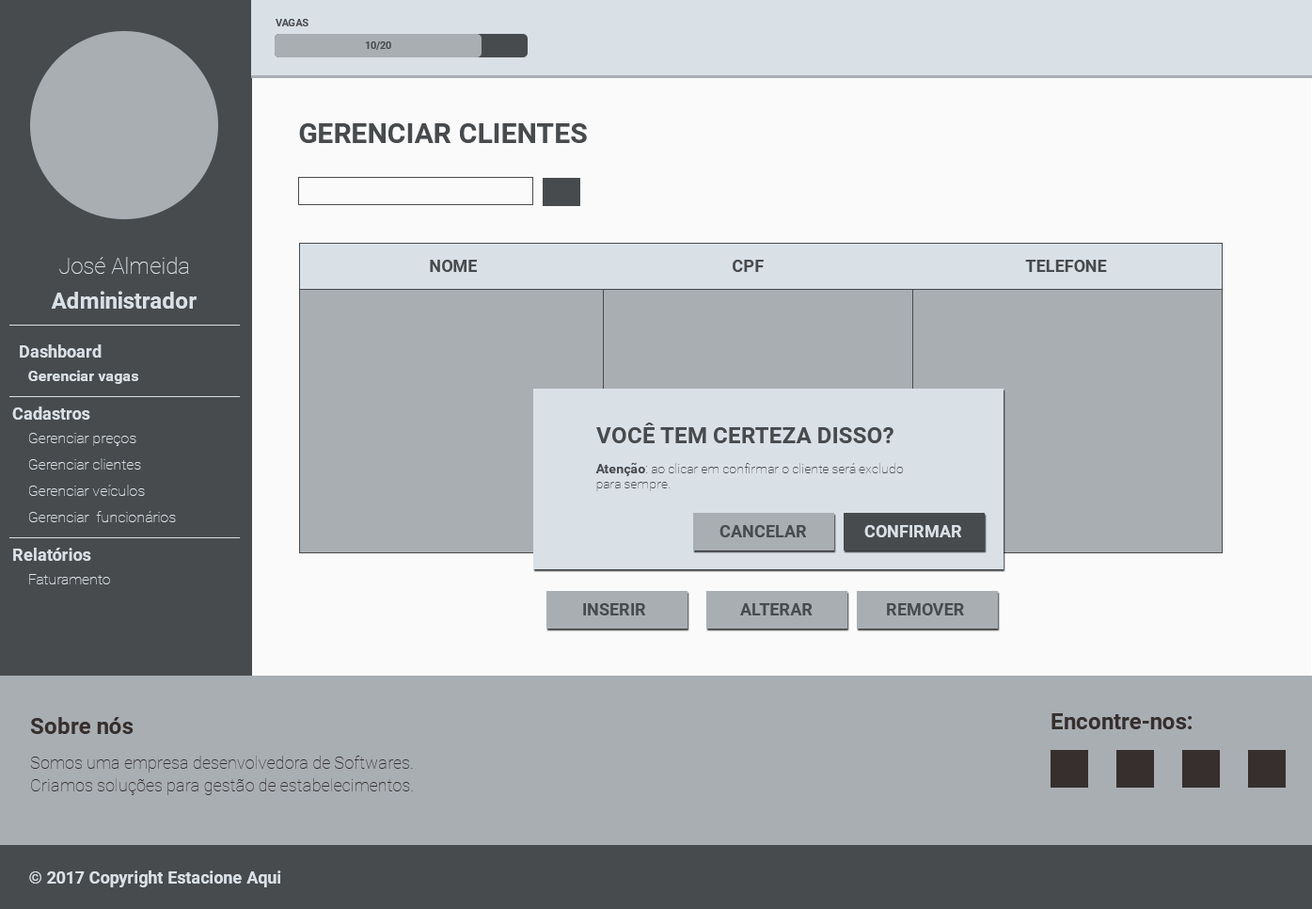
<style>
.page{position:relative;width:1312px;height:909px;background:#a9aeb3}
.page>*{position:absolute;margin:0}
.t1{font:10.3px "Roboto-Bold";color:#484b4d;text-transform:uppercase}
.t2{font:10.3px "Roboto-Bold";color:#484b4d}
.t3{font:28.2px "Roboto-Bold";color:#484b4d;text-transform:uppercase}
.t4{font:22.6px "Roboto-Thin";color:#d9e0e6}
.t5{font:16.9px "Roboto-Bold";color:#484b4d;text-transform:uppercase}
.t6{font:22.6px "Roboto-Bold";color:#d9e0e6}
.t7{font:16.9px "Roboto-Bold";color:#d9e0e6}
.t8{font:15.1px "Roboto-Bold";color:#d9e0e6}
.t9{font:22.6px "Roboto-Bold";color:#484b4d;text-transform:uppercase}
.t10{font:15.1px "Roboto-Thin";color:#d9e0e6}
.t11{font:13.2px "Roboto-Thin";color:#484b4d}
.t12{font:13.2px "Roboto-Bold";color:#484b4d}
.t13{font:16.9px "Roboto-Bold";color:#d9e0e6;text-transform:uppercase}
.t14{font:22.6px "Roboto-Bold";color:#362f2d}
.t15{font:16.9px/22.6px "Roboto-Thin";color:#362f2d}
</style>
<div class="page">
<p class="t1" style="left:276px;top:19px;width:33px;height:7px">Vagas</p>
<p class="t2" style="left:365px;top:41px;width:26px;height:9px">10/20</p>
<p class="t3" style="left:299px;top:123px;width:288px;height:20px">gerenciar clientes</p>
<p class="t4" style="left:59px;top:257px;width:130px;height:17px">José Almeida</p>
<p class="t5" style="left:430px;top:260px;width:47px;height:12px">nOME</p>
<p class="t5" style="left:733px;top:260px;width:31px;height:12px">CPF</p>
<p class="t5" style="left:1025px;top:260px;width:82px;height:12px">TELEFONE</p>
<p class="t6" style="left:51px;top:291px;width:146px;height:18px">Administrador</p>
<p class="t7" style="left:20px;top:344px;width:82px;height:13px">Dashboard</p>
<p class="t8" style="left:28px;top:370px;width:110px;height:14px">Gerenciar vagas</p>
<p class="t7" style="left:12px;top:406px;width:78px;height:14px">Cadastros</p>
<p class="t9" style="left:596px;top:422px;width:298px;height:21px">VOCÊ TEM CERTEZA DISSO?</p>
<p class="t10" style="left:29px;top:433px;width:107px;height:13px">Gerenciar preços</p>
<p class="t10" style="left:29px;top:458px;width:112px;height:11px">Gerenciar clientes</p>
<p class="t11" style="left:595px;top:462px;width:309px;height:29px"><span class="t12">Atenção</span>: ao clicar em confirmar o cliente será excludo para sempre.</p>
<p class="t10" style="left:29px;top:484px;width:116px;height:12px">Gerenciar veículos</p>
<p class="t10" style="left:29px;top:511px;width:147px;height:11px">Gerenciar  funcionários</p>
<p class="t5" style="left:720px;top:525px;width:86px;height:12px">CancelaR</p>
<p class="t13" style="left:864px;top:525px;width:97px;height:12px">Confirmar</p>
<p class="t7" style="left:13px;top:547px;width:78px;height:14px">Relatórios</p>
<p class="t10" style="left:29px;top:574px;width:81px;height:10px">Faturamento</p>
<p class="t5" style="left:583px;top:603px;width:62px;height:12px">INSERIR</p>
<p class="t5" style="left:740px;top:603px;width:73px;height:12px">ALTERAR</p>
<p class="t5" style="left:887px;top:603px;width:77px;height:12px">REMOVER</p>
<p class="t14" style="left:1052px;top:713px;width:140px;height:16px">Encontre-nos:</p>
<p class="t14" style="left:30px;top:717px;width:104px;height:17px">Sobre nós</p>
<p class="t15" style="left:30px;top:755px;width:383px;height:40px">Somos uma empresa desenvolvedora de Softwares. Criamos soluções para gestão de estabelecimentos.</p>
<p class="t7" style="left:29px;top:870px;width:252px;height:17px">© 2017 Copyright Estacione Aqui</p>
</div>
